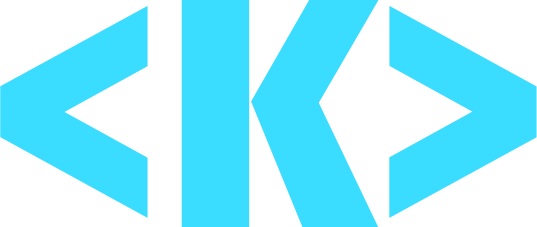
<style>
.page{position:relative;width:537px;height:227px;background:#3adcff}
.page>*{position:absolute;margin:0}
.t1{font:340px "Bauhaus93";color:#3adcff}
</style>
<div class="page">
<p class="t1" style="left:0px;top:0px;width:537px;height:227px">&lt;K&gt;</p>
</div>
